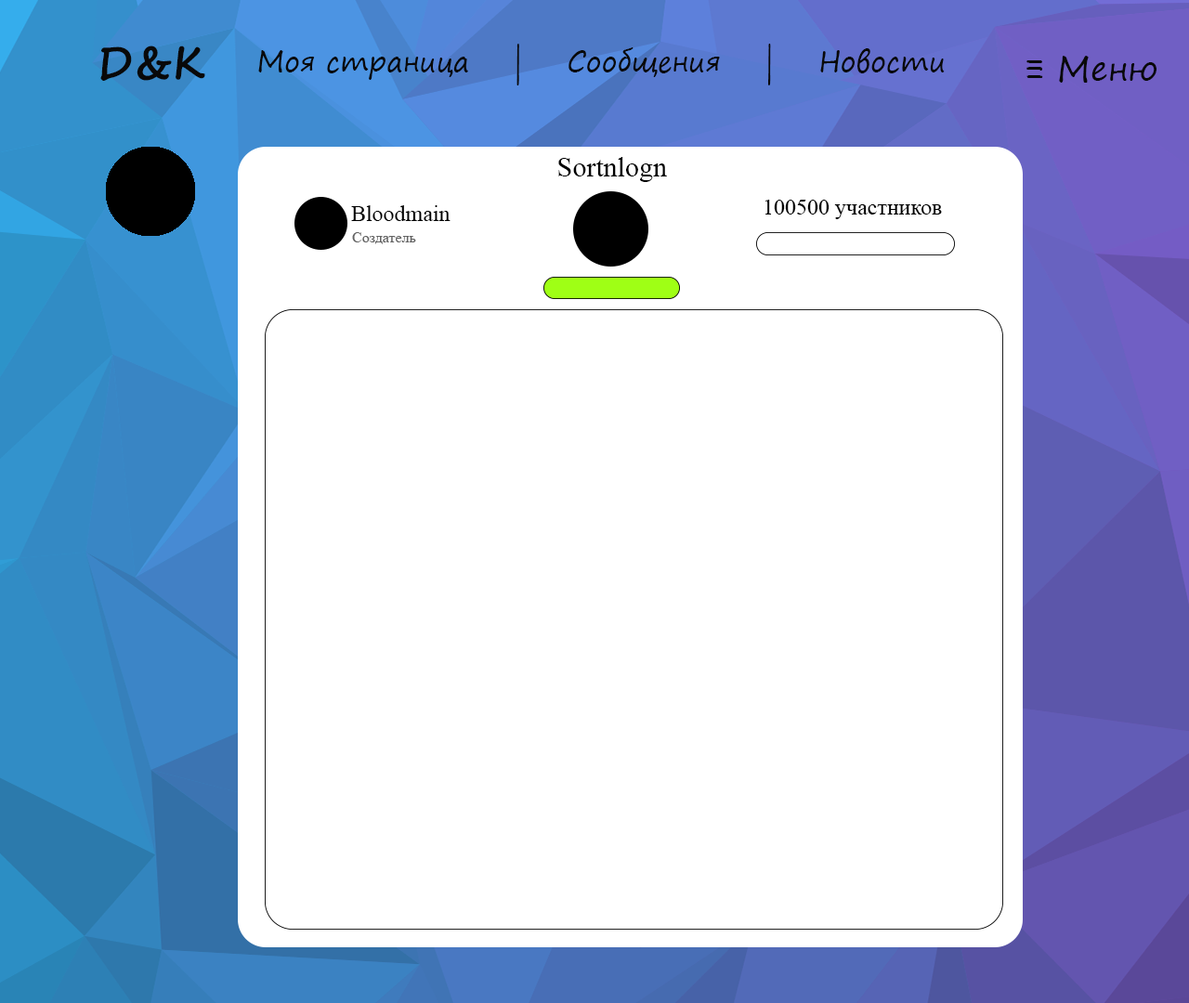
<style>
.page{position:relative;width:1189px;height:1003px;background:#ffffff}
.page>*{position:absolute;margin:0}
.t1{font:44.6px "SegoePrint-Bold";color:#090909}
.t2{font:27.9px "SegoePrint";color:#090909}
.t3{font:33.4px "SegoePrint";color:#090909}
.t4{font:27.9px "TimesNewRomanPSMT";color:#000000}
.t5{font:22.3px "TimesNewRomanPSMT";color:#000000}
.t6{font:14.9px "TimesNewRomanPSMT";color:#646464}
</style>
<div class="page">
<p class="t1" style="left:100px;top:46px;width:105px;height:35px;rotate:-1deg">D&amp;K</p>
<p class="t2" style="left:258px;top:44px;width:687px;height:41px">Моя страница    |    Сообщения    |    Новости</p>
<p class="t3" style="left:1026px;top:56px;width:130px;height:27px">≡ Меню</p>
<p class="t4" style="left:558px;top:157px;width:109px;height:25px">Sortnlogn</p>
<p class="t5" style="left:351px;top:205px;width:99px;height:16px">Bloodmain</p>
<p class="t5" style="left:764px;top:200px;width:178px;height:19px">100500 участников</p>
<p class="t6" style="left:352px;top:232px;width:64px;height:12px">Создатель</p>
</div>
